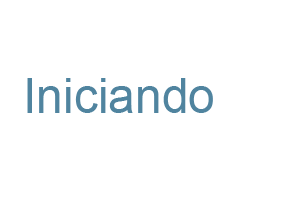
<style>
.page{position:relative;width:300px;height:200px;background:#ffffff}
.page>*{position:absolute;margin:0}
.t1{font:48px "ArialMT";color:#50849f}
</style>
<div class="page">
<p class="t1" style="left:27px;top:78px;width:186px;height:35px">Iniciando</p>
</div>
